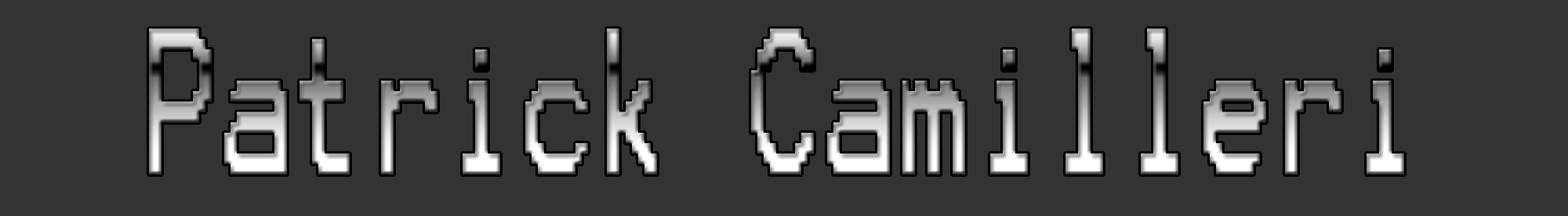
<style>
.page{position:relative;width:1568px;height:216px;background:#333333}
.page>*{position:absolute;margin:0}
.t1{font:166.1px "Terminal";scale:0.6 1}
</style>
<div class="page">
<p class="t1" style="left:149px;top:28px;width:1255px;height:146px">Patrick Camilleri</p>
</div>
